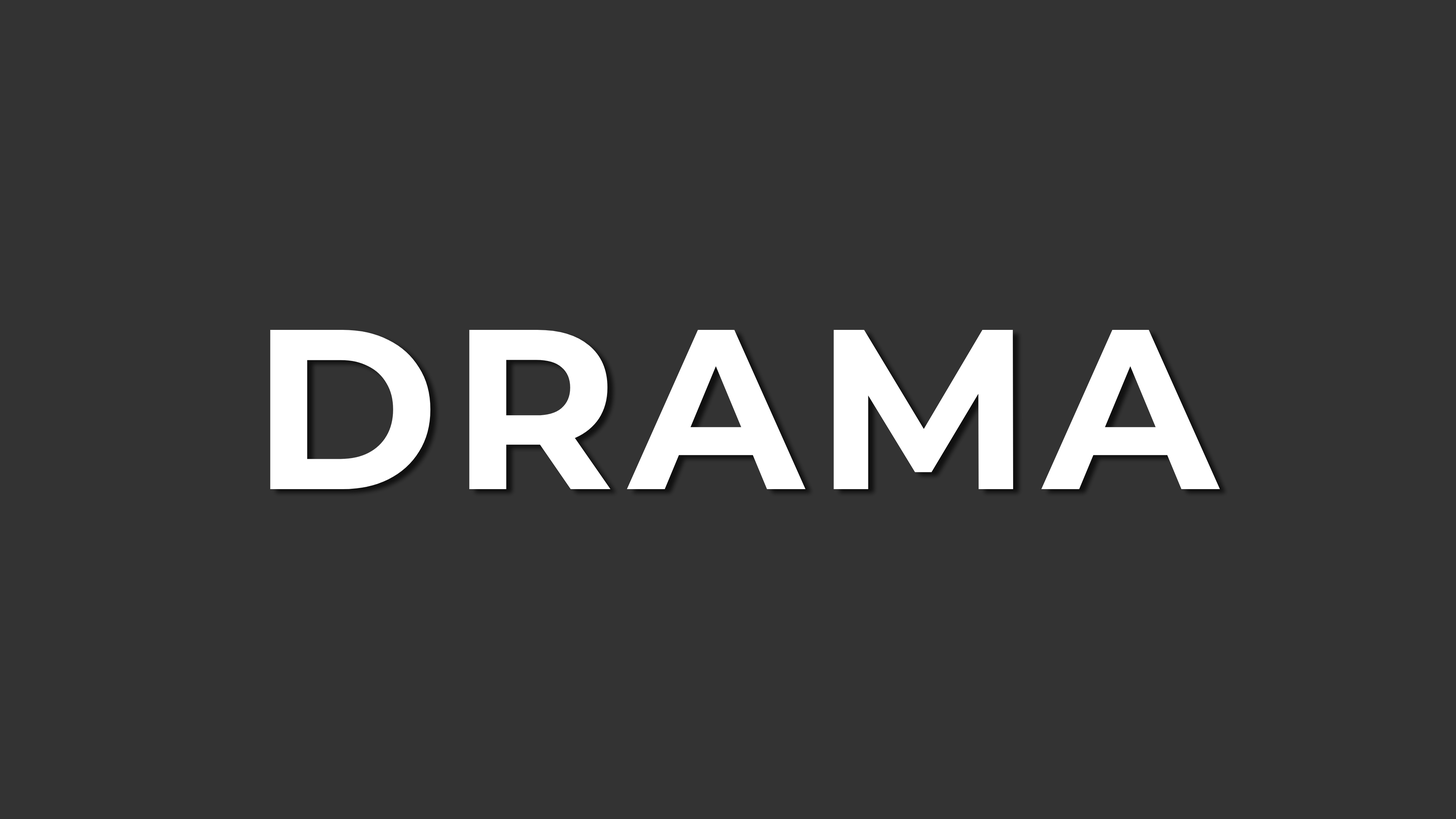
<style>
.page{position:relative;width:1456px;height:819px;background:#333333}
.page>*{position:absolute;margin:0}
.t1{font:227.5px "Montserrat-Bold";letter-spacing:0.05em;color:#ffffff}
</style>
<div class="page">
<p class="t1" style="left:270px;top:330px;width:950px;height:159px">DRAMA</p>
</div>
